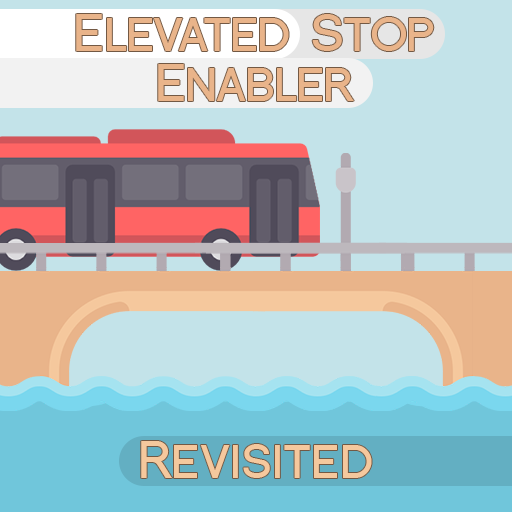
<style>
.page{position:relative;width:512px;height:512px;background:#c3e3e9}
.page>*{position:absolute;margin:0}
.t1{font:50px/50px "FlorencesansSC-Bold";letter-spacing:-0.03em;color:#e9b48a}
.t2{font:50px "FlorencesansSC-Bold";color:#f5c89d}
</style>
<div class="page">
<p class="t1" style="left:76px;top:14px;width:358px;height:87px;text-align:center">Elevated Stop<br>Enabler</p>
<p class="t2" style="left:141px;top:441px;width:231px;height:37px">Revisited</p>
</div>
